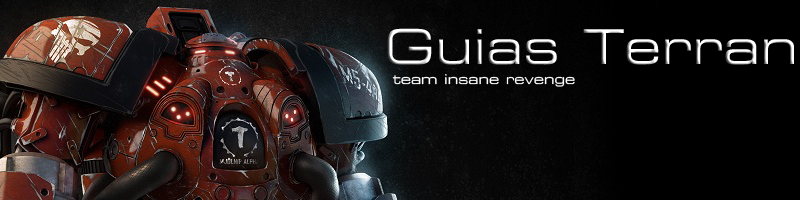
<style>
.page{position:relative;width:800px;height:200px;background:#000000}
.page>*{position:absolute;margin:0}
.t1{font:48px "ESL-eSport-Ext-Light"}
.t2{font:13.3px "ESL-eSport-Ext-Light";color:#ffffff}
</style>
<div class="page">
<p class="t1" style="left:387px;top:28px;width:407px;height:37px">Guias Terran</p>
<p class="t2" style="left:392px;top:74px;width:183px;height:13px">team insane revenge</p>
</div>
